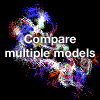
<style>
.page{position:relative;width:100px;height:100px;background:#000000}
.page>*{position:absolute;margin:0}
.t1{font:12px "HelveticaNeue-Bold";color:#ffffff}
</style>
<div class="page">
<p class="t1" style="left:5px;top:34px;width:90px;height:26px;text-align:center">Compare<br>multiple models</p>
</div>
